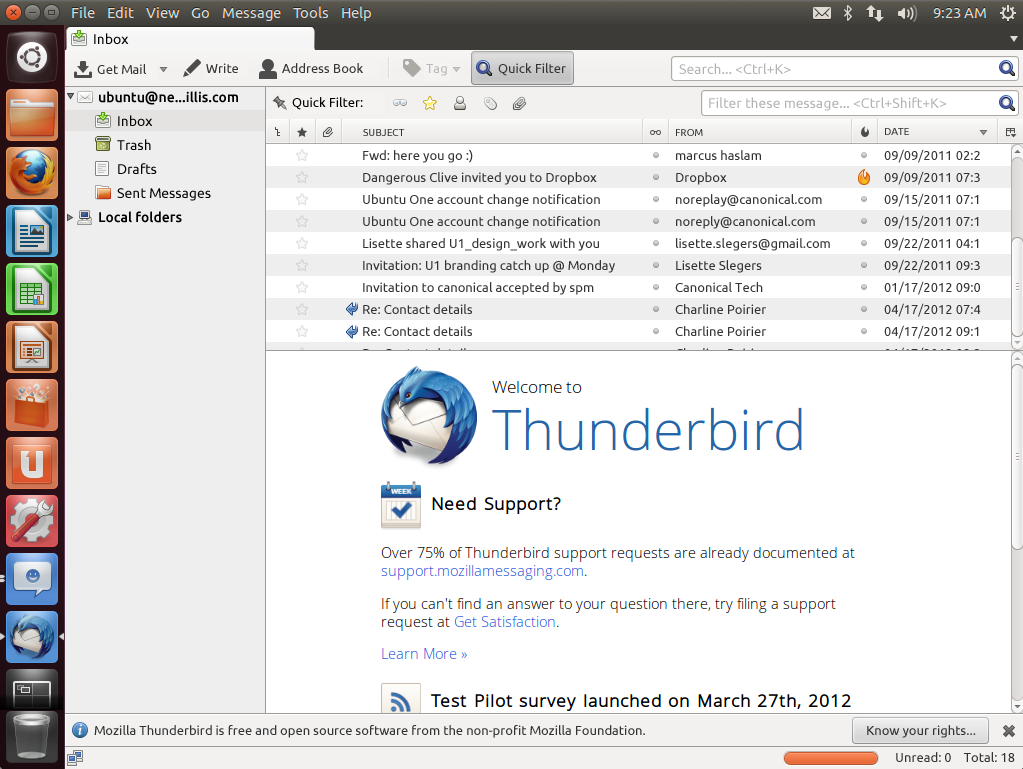
<style>
.page{position:relative;width:1023px;height:769px;background:#ffffff}
.page>*{position:absolute;margin:0}
.t1{font:14px "Ubuntu";color:#000000}
.t2{font:13px "Ubuntu";color:#333333}
.t3{font:13px "Ubuntu";color:#bab9b8}
.t4{font:14px "Ubuntu";color:#b2b2b2}
.t5{font:14px "Ubuntu-Medium";color:#000000}
.t6{font:13px "Ubuntu";color:#000000}
.t7{font:14px/24px "Ubuntu";color:#000000}
.t8{font:10px "Ubuntu";color:#333333;text-transform:uppercase}
.t9{font:13px/22px "Ubuntu";color:#333333}
</style>
<div class="page">
<p class="t1" style="left:94px;top:33px;width:35px;height:11px">Inbox</p>
<p class="t2" style="left:97px;top:64px;width:49px;height:10px">Get Mail</p>
<p class="t2" style="left:206px;top:63px;width:32px;height:10px">Write</p>
<p class="t2" style="left:282px;top:63px;width:81px;height:10px">Address Book</p>
<p class="t3" style="left:426px;top:64px;width:21px;height:12px">Tag</p>
<p class="t2" style="left:498px;top:63px;width:68px;height:13px">Quick Filter</p>
<p class="t4" style="left:679px;top:63px;width:112px;height:11px">Search... &lt;Ctrl+K&gt;</p>
<p class="t5" style="left:99px;top:91px;width:139px;height:14px">ubuntu@ne...illis.com</p>
<p class="t6" style="left:292px;top:97px;width:71px;height:13px">Quick Filter:</p>
<p class="t4" style="left:709px;top:97px;width:238px;height:14px">Filter these message... &lt;Ctrl+Shift+K&gt;</p>
<p class="t7" style="left:117px;top:115px;width:94px;height:86px">Inbox<br>Trash<br>Drafts<br>Sent Messages</p>
<p class="t8" style="left:363px;top:129px;width:42px;height:7px">Subject</p>
<p class="t8" style="left:676px;top:129px;width:27px;height:7px">From</p>
<p class="t8" style="left:885px;top:128px;width:24px;height:7px">Date</p>
<p class="t9" style="left:363px;top:149px;width:252px;height:209px">Fwd: here you go :)<br>Dangerous Clive invited you to Dropbox<br>Ubuntu One account change notification<br>Ubuntu One account change notification<br>Lisette shared U1_design_work with you<br>Invitation: U1 branding catch up @ Monday<br>Invitation to canonical accepted by spm<br>Re: Contact details<br>Re: Contact details<br>Re: Contact details</p>
<p class="t9" style="left:675px;top:150px;width:155px;height:208px">marcus haslam<br>Dropbox<br>noreplay@canonical.com<br>noreply@canonical.com<br>lisette.slegers@gmail.com<br>Lisette Slegers<br>Canonical Tech<br>Charline Poirier<br>Charline Poirier<br>Charline Poirier</p>
<p class="t9" style="left:884px;top:149px;width:97px;height:212px">09/09/2011 02:2<br>09/09/2011 07:3<br>09/15/2011 07:1<br>09/15/2011 07:1<br>09/22/2011 04:1<br>09/22/2011 09:3<br>01/17/2012 09:0<br>04/17/2012 07:4<br>04/17/2012 09:1<br>04/17/2012 09:2</p>
<p class="t5" style="left:99px;top:211px;width:83px;height:12px">Local folders</p>
<p class="t2" style="left:94px;top:725px;width:551px;height:13px">Mozilla Thunderbird is free and open source software from the non-profit Mozilla Foundation.</p>
<p class="t2" style="left:867px;top:725px;width:109px;height:13px">Know your rights...</p>
<p class="t2" style="left:896px;top:752px;width:119px;height:10px">Unread: 0    Total: 18</p>
</div>
